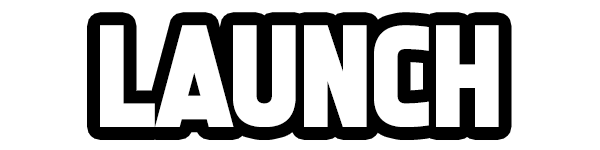
<style>
.page{position:relative;width:600px;height:150px;background:#ffffff}
.page>*{position:absolute;margin:0}
.t1{font:160px "SheSmiles";color:#ffffff}
</style>
<div class="page">
<p class="t1" style="left:100px;top:25px;width:399px;height:102px">launch</p>
</div>
